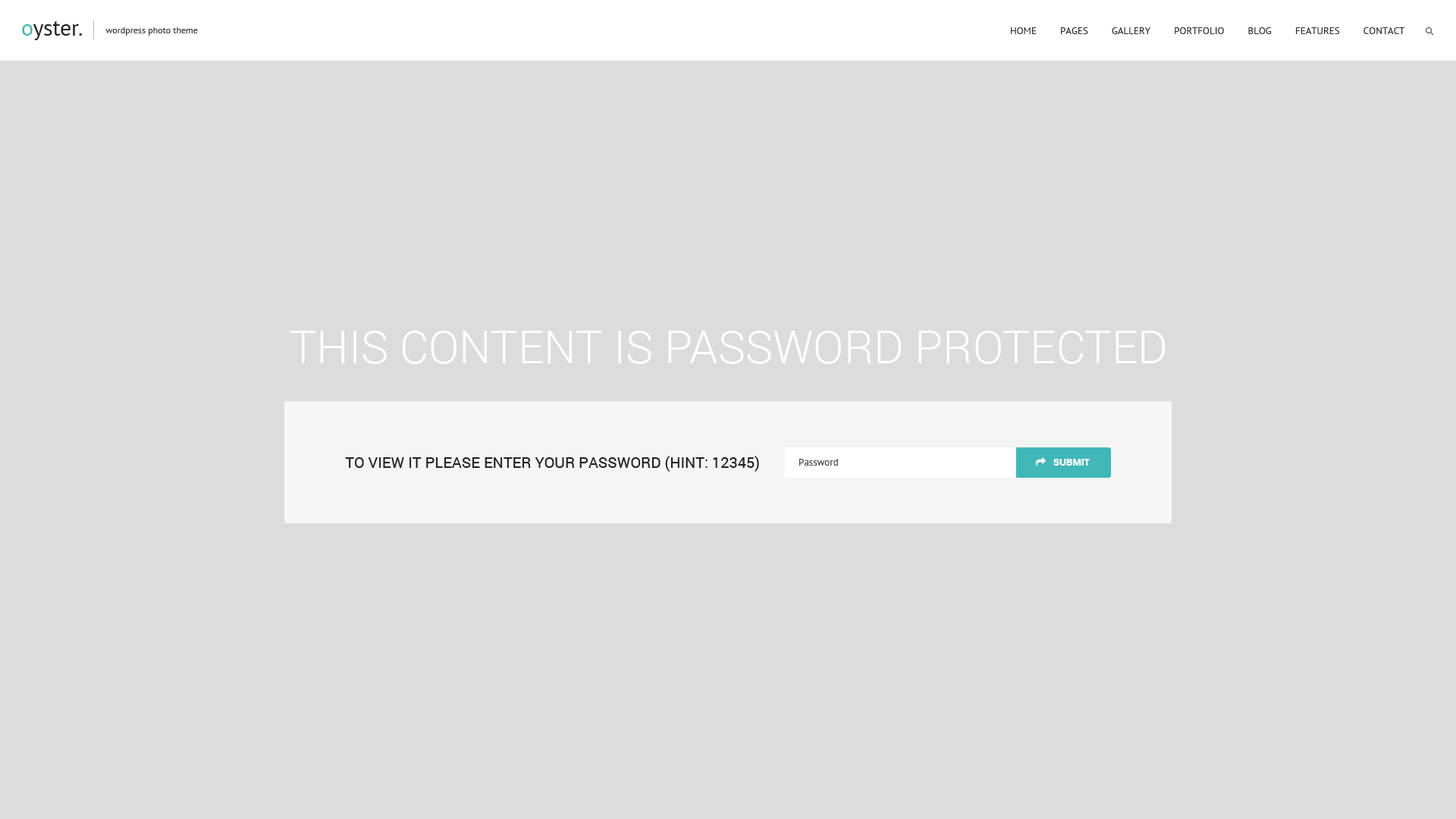
<style>
.page{position:relative;width:1456px;height:819px;background:#dcdcdc}
.page>*{position:absolute;margin:0}
.t1{font:9.1px "PTSans-Regular";color:#434343}
.t2{font:9.9px "PTSans-Regular";color:#343434;text-transform:uppercase}
.t3{font:45.5px "Roboto-Light";color:#ffffff;text-transform:uppercase}
.t4{font:15.2px "Roboto-Regular";color:#222222;text-transform:uppercase}
.t5{font:9.9px "PTSans-Regular";color:#444444}
</style>
<div class="page">
<p class="t1" style="left:105px;top:27px;width:93px;height:9px">wordpress photo theme</p>
<p class="t2" style="left:1011px;top:27px;width:394px;height:7px">Home         Pages         Gallery         Portfolio         Blog         Features         Contact</p>
<p class="t3" style="left:290px;top:331px;width:875px;height:33px">THIS CONTENT IS PASSWORD PROTECTED</p>
<p class="t4" style="left:345px;top:456px;width:414px;height:16px">TO VIEW IT PLEASE ENTER YOUR PASSWORD (HINT: 12345)</p>
<p class="t5" style="left:799px;top:459px;width:39px;height:7px">Password</p>
</div>
